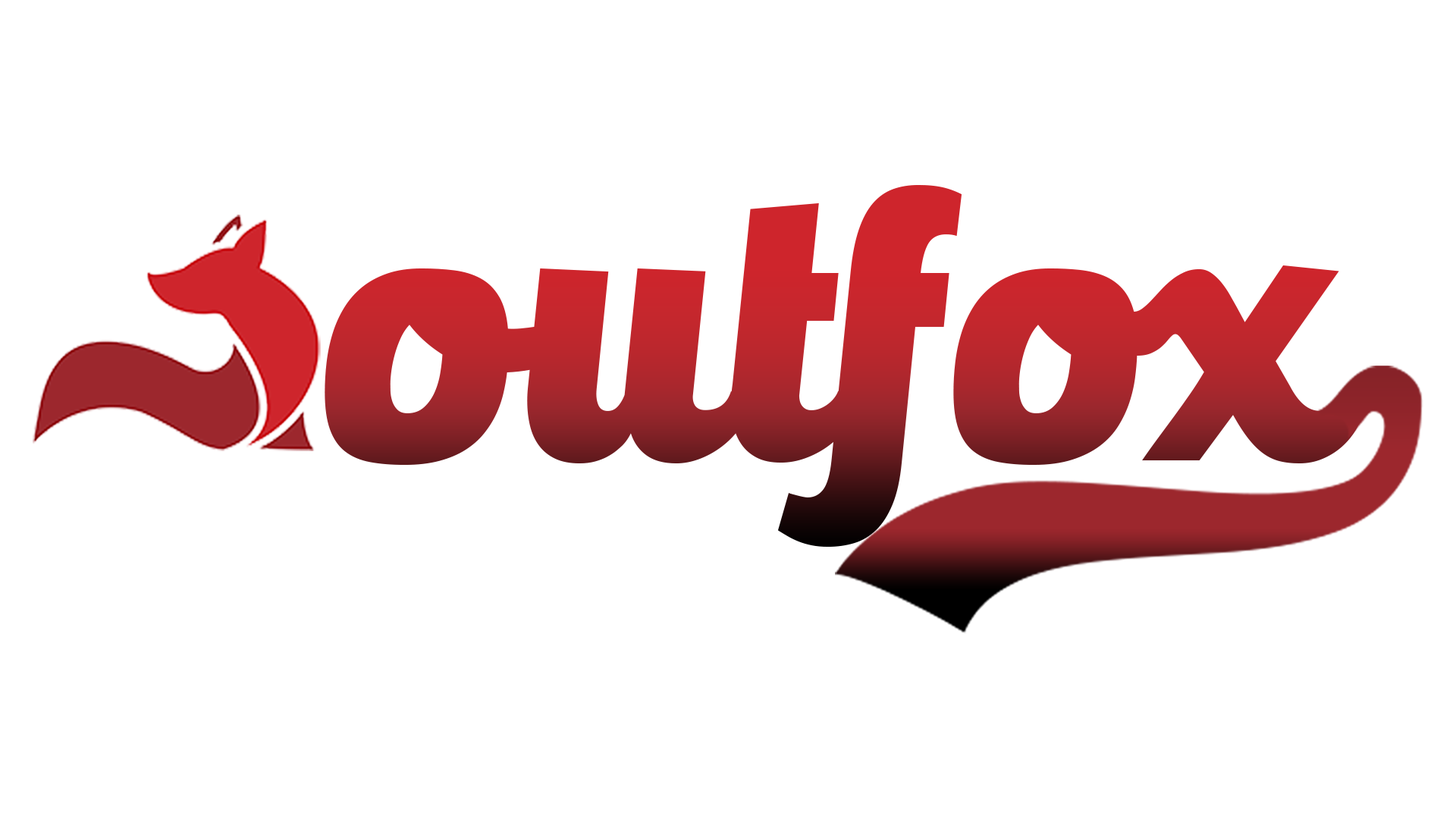
<style>
.page{position:relative;width:1456px;height:819px;background:#ffffff}
.page>*{position:absolute;margin:0}
.t1{font:357.7px "BullettoKilla"}
</style>
<div class="page">
<p class="t1" style="left:325px;top:185px;width:1038px;height:362px">outfox</p>
</div>
